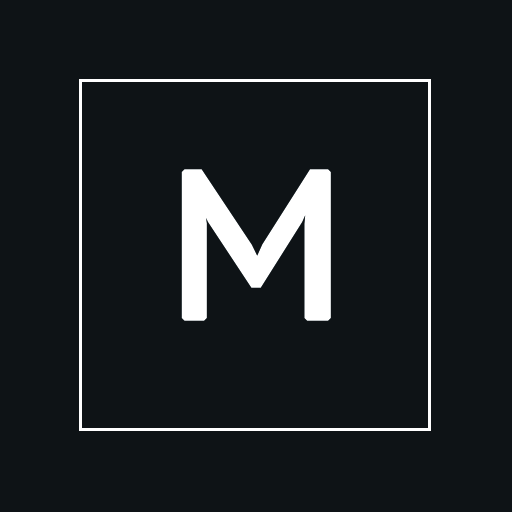
<style>
.page{position:relative;width:512px;height:512px;background:#0e1316}
.page>*{position:absolute;margin:0}
.t1{font:208px "PTSans-Caption";letter-spacing:-0.04em;color:#ffffff;font-weight:bold}
</style>
<div class="page">
<p class="t1" style="left:181px;top:169px;width:150px;height:152px">M</p>
</div>
